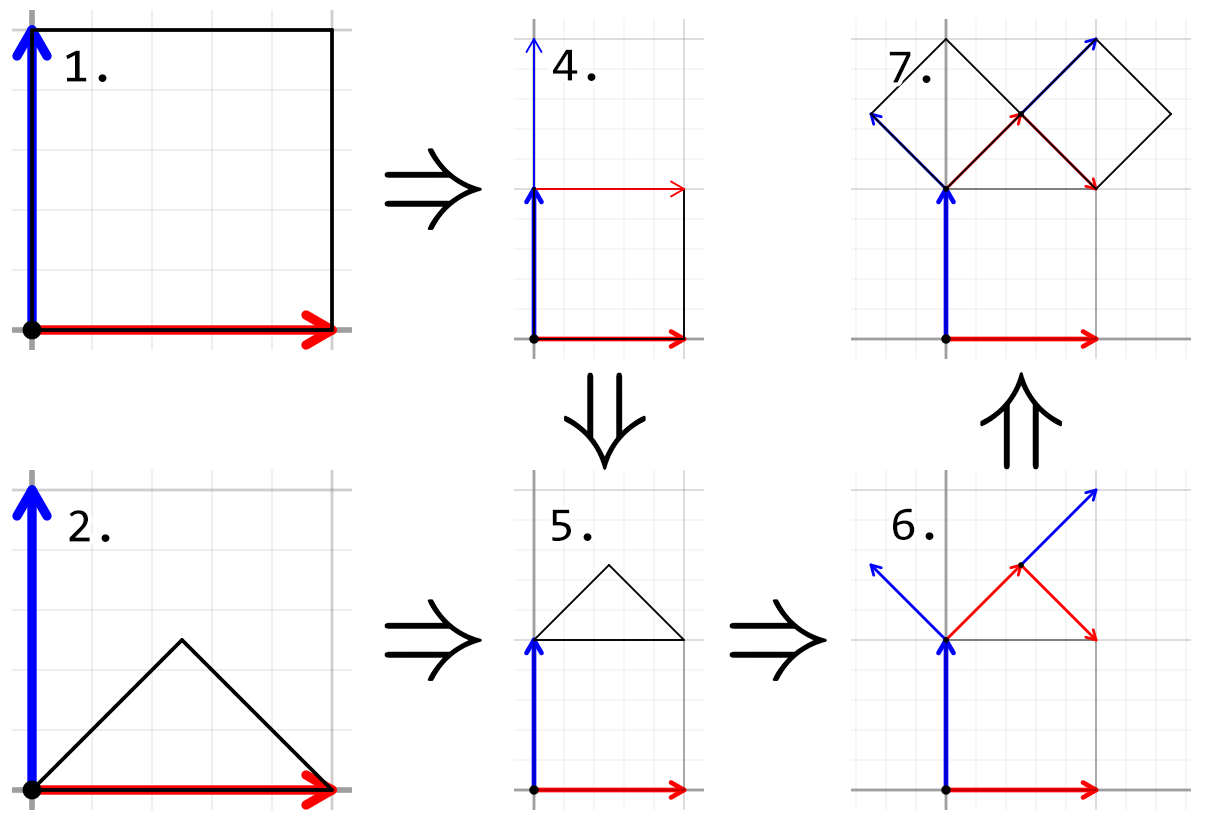
<style>
.page{position:relative;width:1216px;height:828px;background:#ffffff}
.page>*{position:absolute;margin:0}
.t1{font:48px "Consolas";color:#000000}
</style>
<div class="page">
<p class="t1" style="left:66px;top:50px;width:41px;height:32px">1.</p>
<p class="t1" style="left:553px;top:49px;width:43px;height:32px">4.</p>
<p class="t1" style="left:889px;top:51px;width:42px;height:32px">7.</p>
<p class="t1" style="left:69px;top:510px;width:41px;height:32px">2.</p>
<p class="t1" style="left:552px;top:509px;width:40px;height:32px">5.</p>
<p class="t1" style="left:893px;top:508px;width:41px;height:32px">6.</p>
</div>
